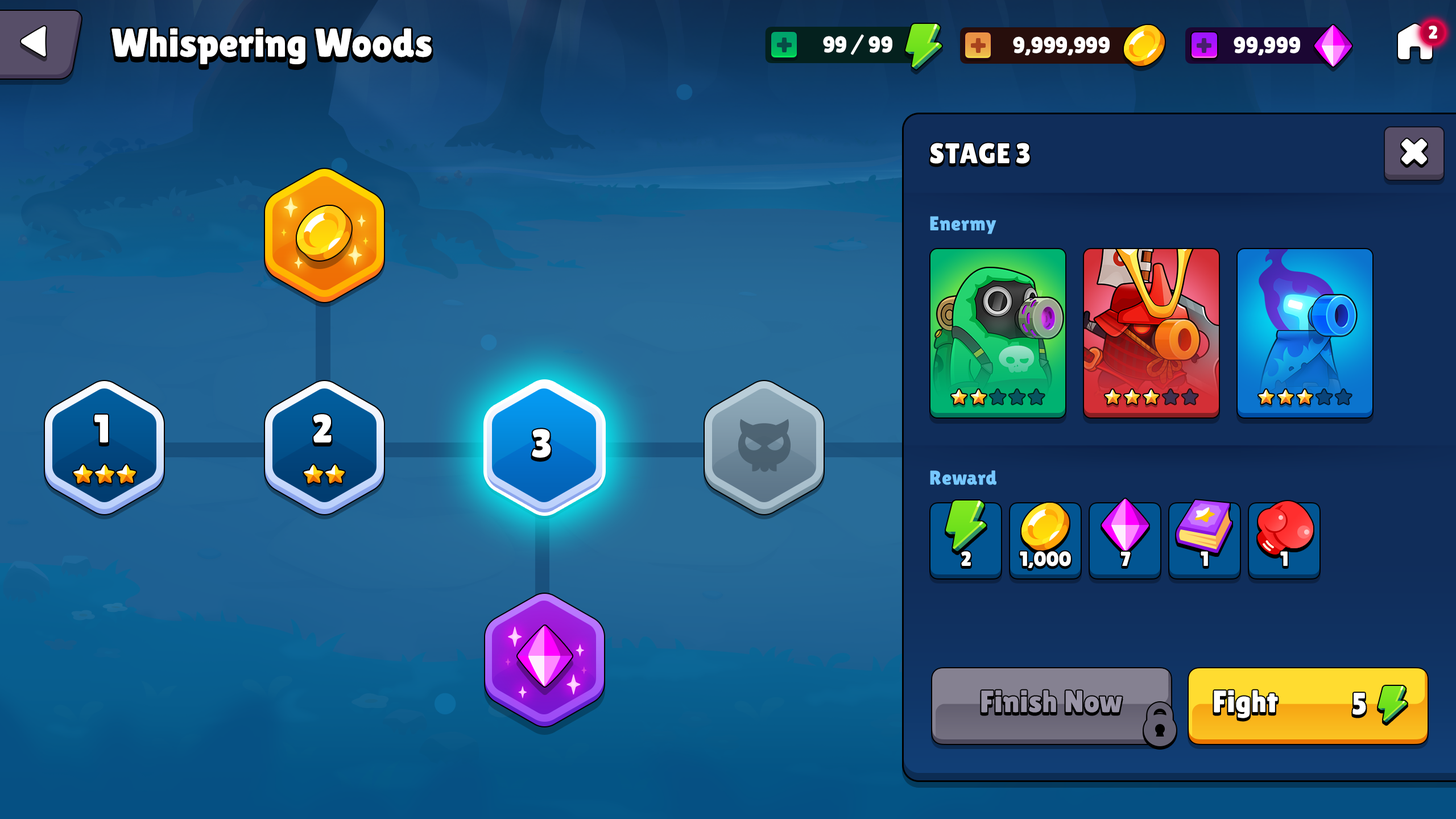
<style>
.page{position:relative;width:1456px;height:819px}
.page>*{position:absolute;margin:0}
.t1{font:39.8px "LilitaOne";color:#ffffff}
.t2{font:18.2px "LilitaOne";color:#ffffff;text-transform:uppercase}
.t3{font:22.7px "LilitaOne";letter-spacing:-0.01em;color:#ffffff;text-transform:uppercase}
.t4{font:28.4px "LilitaOne";color:#ffffff;text-transform:uppercase}
.t5{font:19.9px "LilitaOne";color:#76c7ff}
.t6{font:20.5px "LilitaOne";color:#ffffff;text-transform:uppercase}
.t7{font:30.7px "LilitaOne";letter-spacing:0.02em;color:#9a95a7}
.t8{font:30.7px "LilitaOne";letter-spacing:0.02em;color:#ffffff}
</style>
<div class="page">
<p class="t1" style="left:111px;top:28px;width:321px;height:36px">Whispering Woods</p>
<p class="t2" style="left:1429px;top:26px;width:8px;height:13px">2</p>
<p class="t3" style="left:823px;top:34px;width:69px;height:21px">99 / 99</p>
<p class="t3" style="left:1013px;top:36px;width:97px;height:20px">9,999,999</p>
<p class="t3" style="left:1234px;top:36px;width:66px;height:20px">99,999</p>
<p class="t4" style="left:930px;top:143px;width:100px;height:21px">Stage 3</p>
<p class="t5" style="left:930px;top:216px;width:66px;height:18px">Enermy</p>
<p class="t1" style="left:94px;top:415px;width:14px;height:27px">1</p>
<p class="t1" style="left:313px;top:414px;width:19px;height:28px">2</p>
<p class="t1" style="left:532px;top:429px;width:19px;height:29px">3</p>
<p class="t5" style="left:930px;top:470px;width:66px;height:15px">Reward</p>
<p class="t6" style="left:961px;top:551px;width:10px;height:15px">2</p>
<p class="t6" style="left:1020px;top:551px;width:51px;height:17px">1,000</p>
<p class="t6" style="left:1120px;top:552px;width:11px;height:14px">7</p>
<p class="t6" style="left:1201px;top:551px;width:7px;height:15px">1</p>
<p class="t6" style="left:1280px;top:551px;width:8px;height:15px">1</p>
<p class="t7" style="left:981px;top:690px;width:141px;height:23px">Finish Now</p>
<p class="t8" style="left:1214px;top:690px;width:64px;height:28px">Fight</p>
<p class="t8" style="left:1352px;top:693px;width:14px;height:22px">5</p>
</div>
